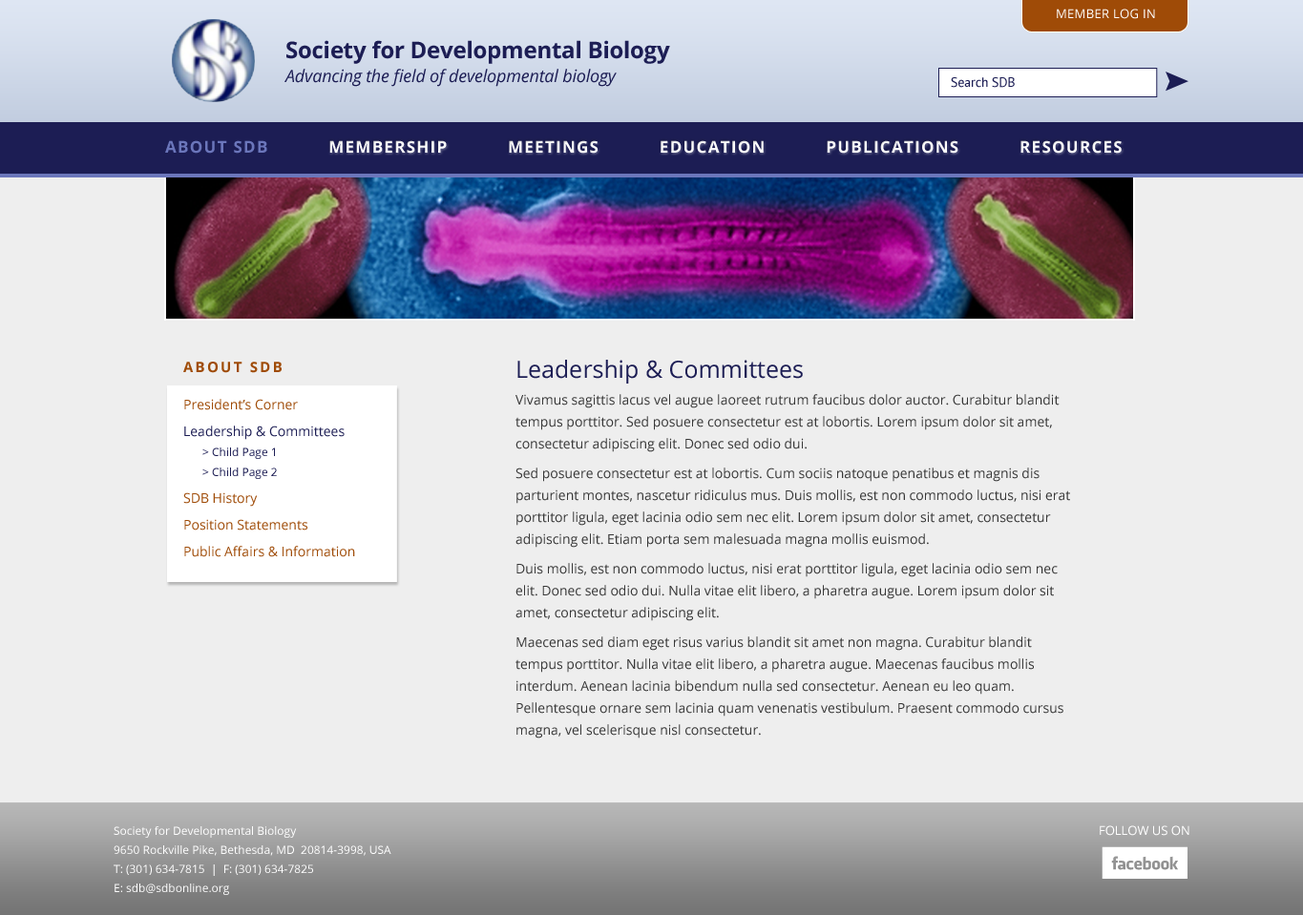
<style>
.page{position:relative;width:1303px;height:915px;background:#eeeeee}
.page>*{position:absolute;margin:0}
.t1{font:12.4px "OpenSans";letter-spacing:0.025em;color:#ffffff;text-transform:uppercase}
.t2{font:22.9px "OpenSans-Bold";letter-spacing:-0.01em;color:#1c1d54}
.t3{font:17.2px "OpenSans-Italic";letter-spacing:-0.01em;color:#1c1d54}
.t4{font:13.4px "PTSans-Regular";letter-spacing:-0.01em;color:#1c1d54}
.t5{font:16.2px "OpenSans-Bold";letter-spacing:0.075em;color:#ffffff;text-transform:uppercase}
.t6{font:16.2px "OpenSans-Bold";letter-spacing:0.075em;color:#6b76bb;text-transform:uppercase}
.t7{font:14.3px "OpenSans-Bold";letter-spacing:0.15em;color:#9f4b07;text-transform:uppercase}
.t8{font:13.4px/22px "OpenSans";color:#373737}
.t9{font:23.9px/17.2px "OpenSans";color:#1c1d54}
.t10{font:13.4px/17.2px "OpenSans";color:#9f4b07}
.t11{font:13.4px/17.2px "OpenSans";color:#1c1d54}
.t12{font:11.5px/17.2px "OpenSans";color:#1c1d54}
.t13{font:11.5px/14.3px "OpenSans";color:#ffffff}
.t14{font:12.4px "OpenSans";color:#ffffff;text-transform:uppercase}
</style>
<div class="page">
<p class="t1" style="left:1057px;top:9px;width:98px;height:10px">Member Log In</p>
<p class="t2" style="left:286px;top:40px;width:384px;height:24px">Society for Developmental Biology</p>
<p class="t3" style="left:284px;top:69px;width:333px;height:18px">Advancing the field of developmental biology</p>
<p class="t4" style="left:951px;top:77px;width:64px;height:11px">Search SDB</p>
<p class="t5" style="left:165px;top:140px;width:956px;height:14px">About SDB           Membership           Meetings           Education           Publications           Resources</p>
<p class="t6" style="left:165px;top:140px;width:102px;height:14px">About SDB</p>
<p class="t7" style="left:183px;top:362px;width:99px;height:11px">about sdb</p>
<p class="t8" style="left:515px;top:360px;width:555px;height:379px"><span class="t9">Leadership &amp; Committees<br></span>Vivamus sagittis lacus vel augue laoreet rutrum faucibus dolor auctor. Curabitur blandit tempus porttitor. Sed posuere consectetur est at lobortis. Lorem ipsum dolor sit amet, consectetur adipiscing elit. Donec sed odio dui.<br>Sed posuere consectetur est at lobortis. Cum sociis natoque penatibus et magnis dis parturient montes, nascetur ridiculus mus. Duis mollis, est non commodo luctus, nisi erat porttitor ligula, eget lacinia odio sem nec elit. Lorem ipsum dolor sit amet, consectetur adipiscing elit. Etiam porta sem malesuada magna mollis euismod.<br>Duis mollis, est non commodo luctus, nisi erat porttitor ligula, eget lacinia odio sem nec elit. Donec sed odio dui. Nulla vitae elit libero, a pharetra augue. Lorem ipsum dolor sit amet, consectetur adipiscing elit.<br>Maecenas sed diam eget risus varius blandit sit amet non magna. Curabitur blandit tempus porttitor. Nulla vitae elit libero, a pharetra augue. Maecenas faucibus mollis interdum. Aenean lacinia bibendum nulla sed consectetur. Aenean eu leo quam. Pellentesque ornare sem lacinia quam venenatis vestibulum. Praesent commodo cursus magna, vel scelerisque nisl consectetur.</p>
<p class="t10" style="left:183px;top:399px;width:172px;height:158px">President’s Corner<br><span class="t11">Leadership &amp; Committees<br></span><span class="t12">&gt; Child Page 1<br>&gt; Child Page 2<br></span>SDB History<br>Position Statements<br>Public Affairs &amp; Information</p>
<p class="t13" style="left:114px;top:827px;width:277px;height:68px">Society for Developmental Biology<br>9650 Rockville Pike, Bethesda, MD  20814-3998, USA<br>T: (301) 634-7815  |  F: (301) 634-7825<br>E: sdb@sdbonline.org</p>
<p class="t14" style="left:1099px;top:826px;width:90px;height:10px">Follow Us On</p>
</div>
